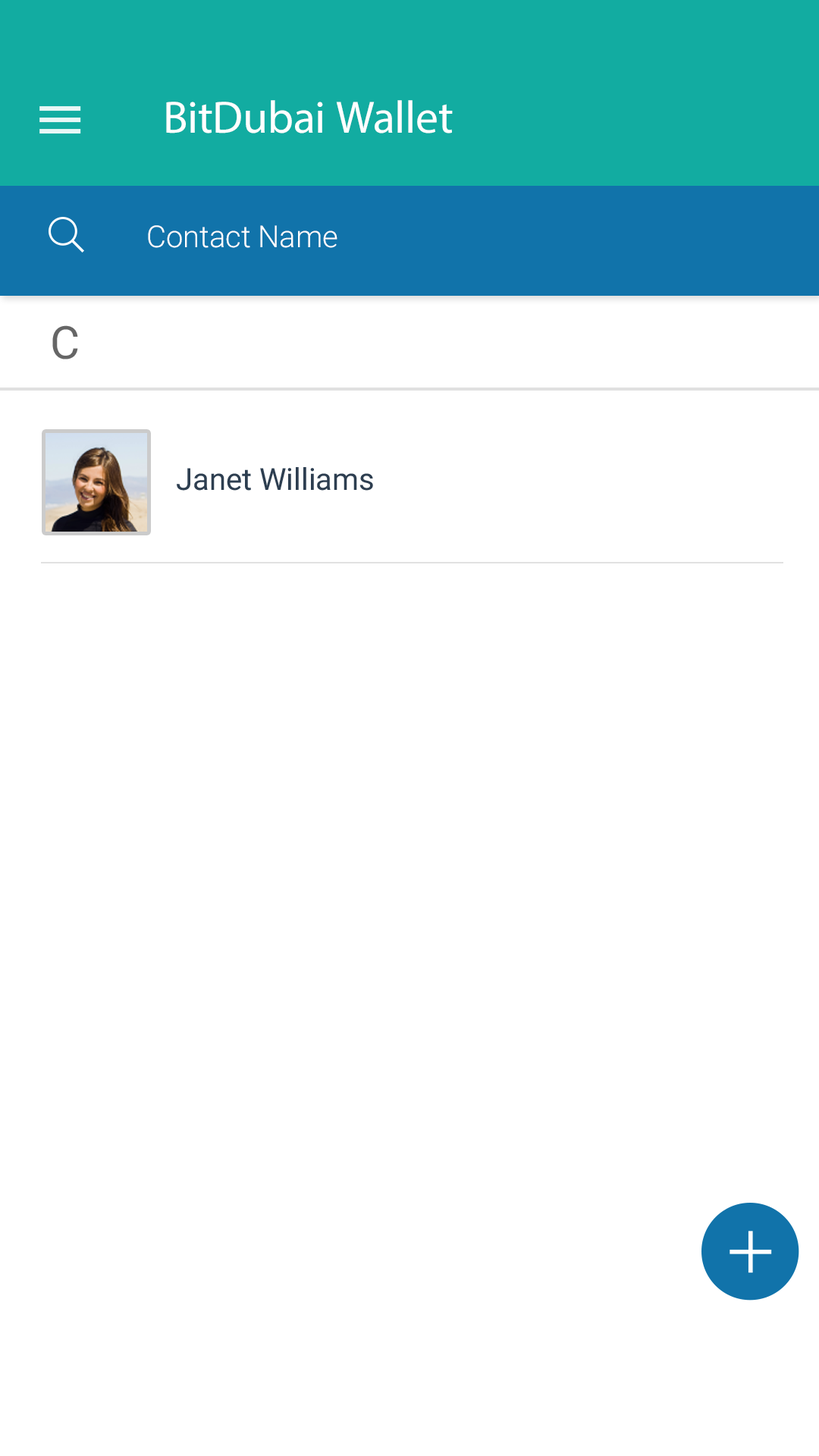
<style>
.page{position:relative;width:819px;height:1456px;background:#ffffff}
.page>*{position:absolute;margin:0}
.t1{font:45.5px "MyriadPro-Regular";letter-spacing:0.005em;color:#ffffff}
.t2{font:30.3px "Roboto-Light";color:#ffffff}
.t3{font:45.5px "Roboto-Regular";color:#666666}
.t4{font:30.3px "Roboto-Regular";color:#2d3e50}
</style>
<div class="page">
<p class="t1" style="left:166px;top:100px;width:287px;height:33px">BitDubai Wallet</p>
<p class="t2" style="left:148px;top:225px;width:189px;height:23px">Contact Name</p>
<p class="t3" style="left:52px;top:325px;width:26px;height:34px">C</p>
<p class="t4" style="left:177px;top:467px;width:196px;height:24px">Janet Williams</p>
</div>
